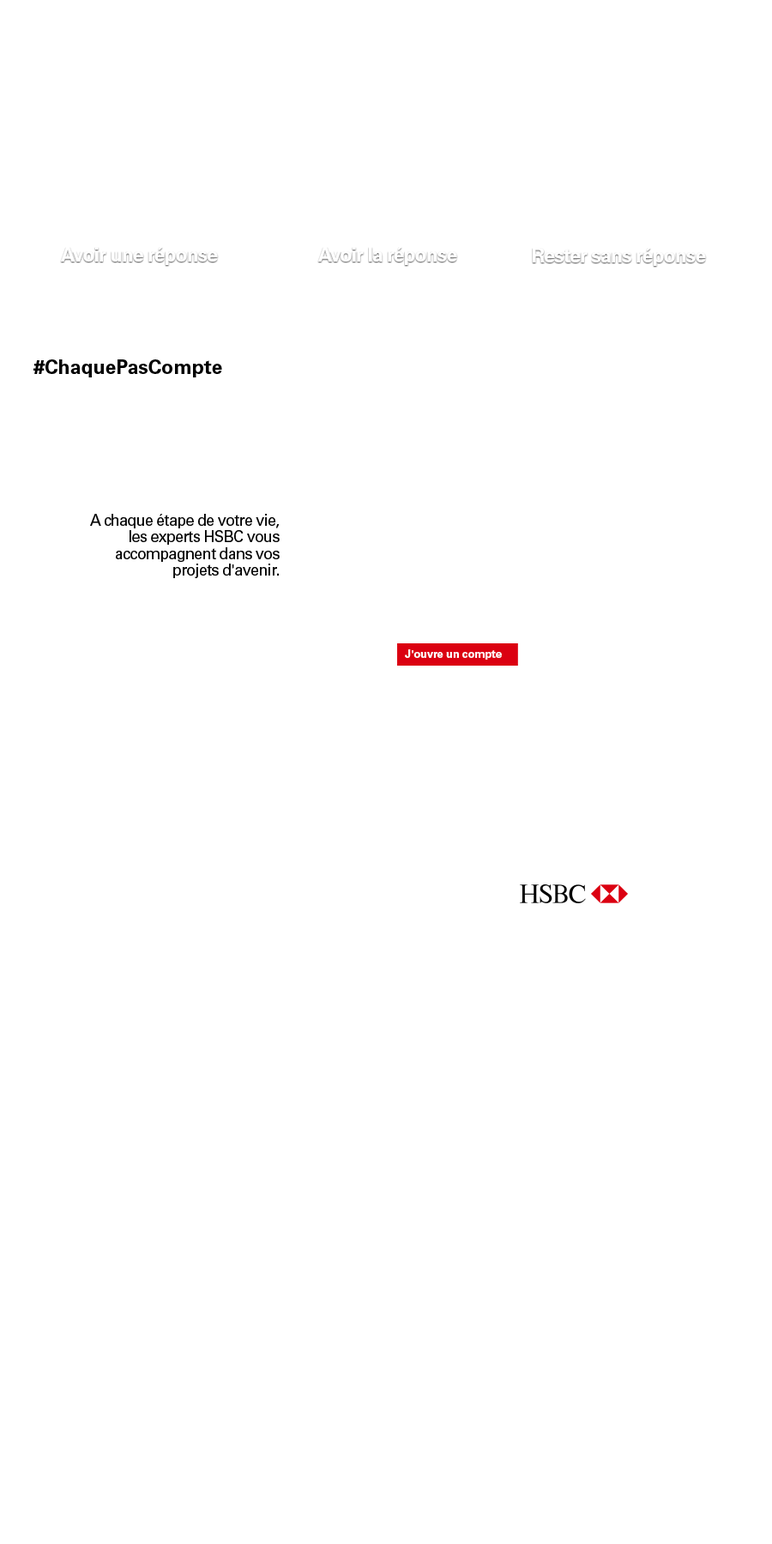
<style>
.page{position:relative;width:772px;height:1544px;background:#ffffff}
.page>*{position:absolute;margin:0}
.t1{font:19.7px "UniversLTStd-Bold";color:#000000}
.t2{font:15.4px/16.6px "UniversLTStd";letter-spacing:-0.04em;color:#000000}
.t3{font:11.2px "UniversLTStd-Bold";letter-spacing:-0.01em;color:#ffffff}
</style>
<div class="page">
<p class="t1" style="left:33px;top:359px;width:189px;height:18px">#ChaquePasCompte</p>
<p class="t2" style="left:90px;top:514px;width:190px;height:64px;text-align:right">A chaque étape de votre vie, les experts HSBC vous accompagnent dans vos projets d'avenir.</p>
<p class="t3" style="left:405px;top:649px;width:97px;height:11px">J'ouvre un compte</p>
</div>
